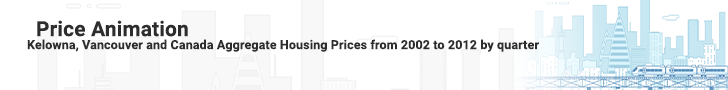
<style>
.page{position:relative;width:728px;height:90px;background:#ffffff}
.page>*{position:absolute;margin:0}
.t1{font:20.8px "Roboto-Bold";letter-spacing:0.01em;color:#2d2d2d}
.t2{font:12.5px "Roboto-Bold";letter-spacing:0.01em;color:#2d2d2d}
</style>
<div class="page">
<p class="t1" style="left:37px;top:20px;width:151px;height:17px">Price Animation</p>
<p class="t2" style="left:27px;top:39px;width:512px;height:13px">Kelowna, Vancouver and Canada Aggregate Housing Prices from 2002 to 2012 by quarter</p>
</div>
